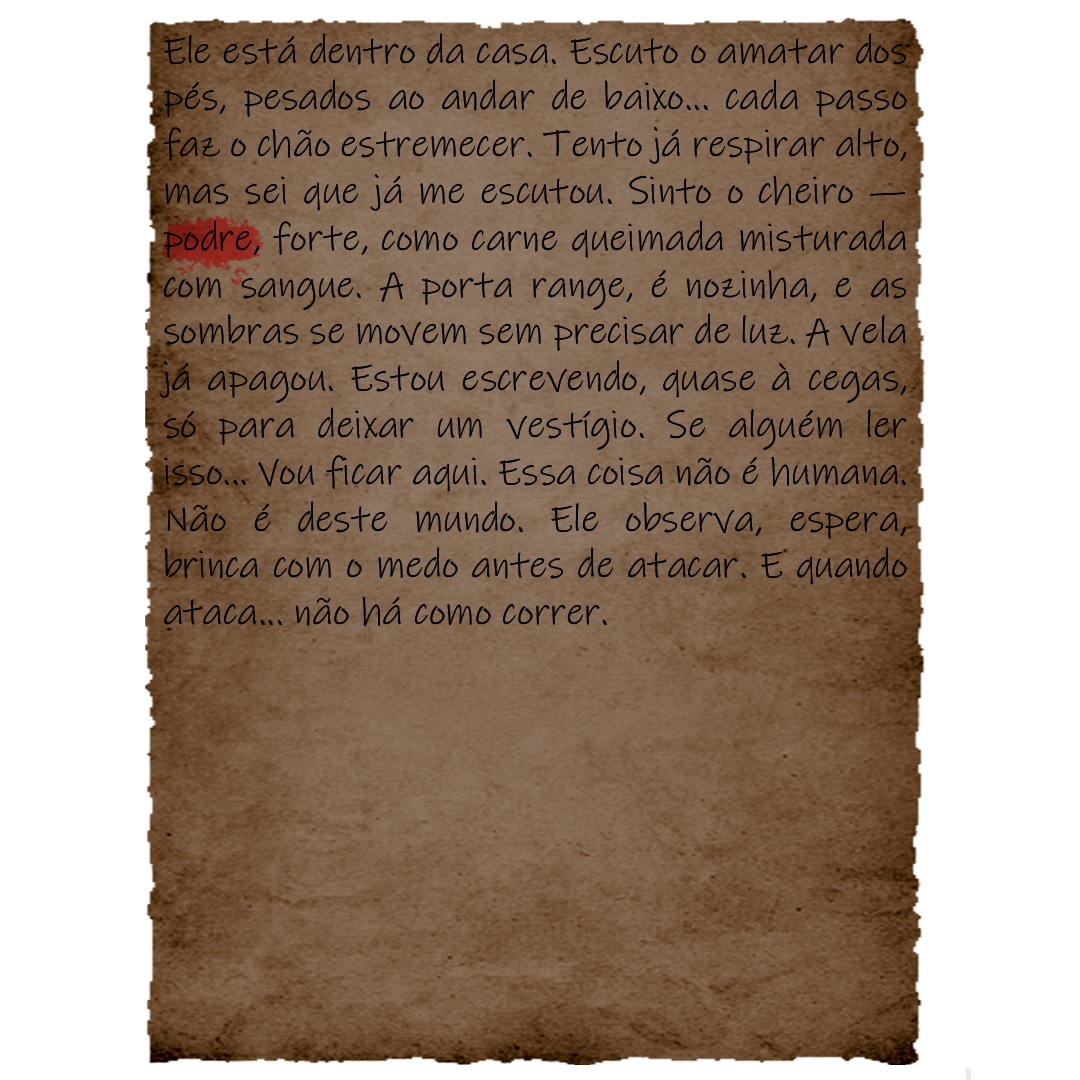
<style>
.page{position:relative;width:1080px;height:1080px;background:#ffffff}
.page>*{position:absolute;margin:0}
.t1{font:39px "InkFree";color:#000000}
</style>
<div class="page">
<p class="t1" style="left:159px;top:33px;width:748px;height:594px;text-align:justify">Ele está dentro da casa. Escuto o amatar dos pés, pesados ao andar de baixo... cada passo faz o chão estremecer. Tento já respirar alto, mas sei que já me escutou. Sinto o cheiro — podre, forte, como carne queimada misturada com sangue. A porta range, é nozinha, e as sombras se movem sem precisar de luz. A vela já apagou. Estou escrevendo, quase à cegas, só para deixar um vestígio. Se alguém ler isso... Vou ficar aqui. Essa coisa não é humana. Não é deste mundo. Ele observa, espera, brinca com o medo antes de atacar. E quando ataca... não há como correr.</p>
</div>
